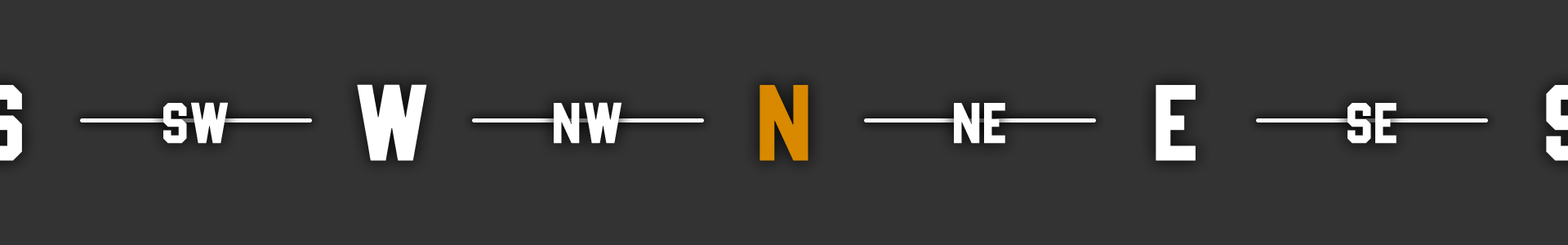
<style>
.page{position:relative;width:1568px;height:245px;background:#333333}
.page>*{position:absolute;margin:0}
.t1{font:110.2px "Basketball";color:#ffffff}
.t2{font:110.2px "Basketball";color:#d88900}
.t3{font:58.8px "Basketball";color:#ffffff}
</style>
<div class="page">
<p class="t1" style="left:357px;top:84px;width:70px;height:77px">w</p>
<p class="t2" style="left:760px;top:85px;width:48px;height:76px">N</p>
<p class="t1" style="left:1156px;top:85px;width:40px;height:76px">e</p>
<p class="t3" style="left:163px;top:102px;width:66px;height:42px">sw</p>
<p class="t3" style="left:554px;top:102px;width:68px;height:42px">nw</p>
<p class="t3" style="left:954px;top:103px;width:51px;height:41px">ne</p>
<p class="t3" style="left:1348px;top:103px;width:48px;height:41px">se</p>
</div>
